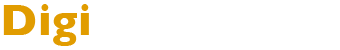
<style>
.page{position:relative;width:340px;height:50px;background:#ffffff}
.page>*{position:absolute;margin:0}
.t1{font:45px "GillSans-Bold";letter-spacing:0.02em;color:#e19c00}
.t2{font:45px "GillSans-Bold";letter-spacing:0.02em;color:#ffffff}
.t3{font:45px "GillSans-Light";letter-spacing:0.025em;color:#ffffff}
</style>
<div class="page">
<p class="t1" style="left:3px;top:4px;width:333px;height:42px">Digi<span class="t2">Show      </span><span class="t3">LINK</span></p>
</div>
